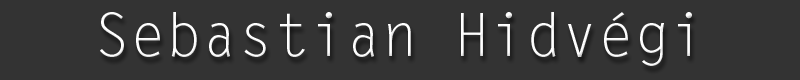
<style>
.page{position:relative;width:800px;height:80px;background:#333333}
.page>*{position:absolute;margin:0}
.t1{font:60px "LetterGothicStd";color:#ffffff}
</style>
<div class="page">
<p class="t1" style="left:100px;top:12px;width:592px;height:54px">Sebastian Hidvégi</p>
</div>
